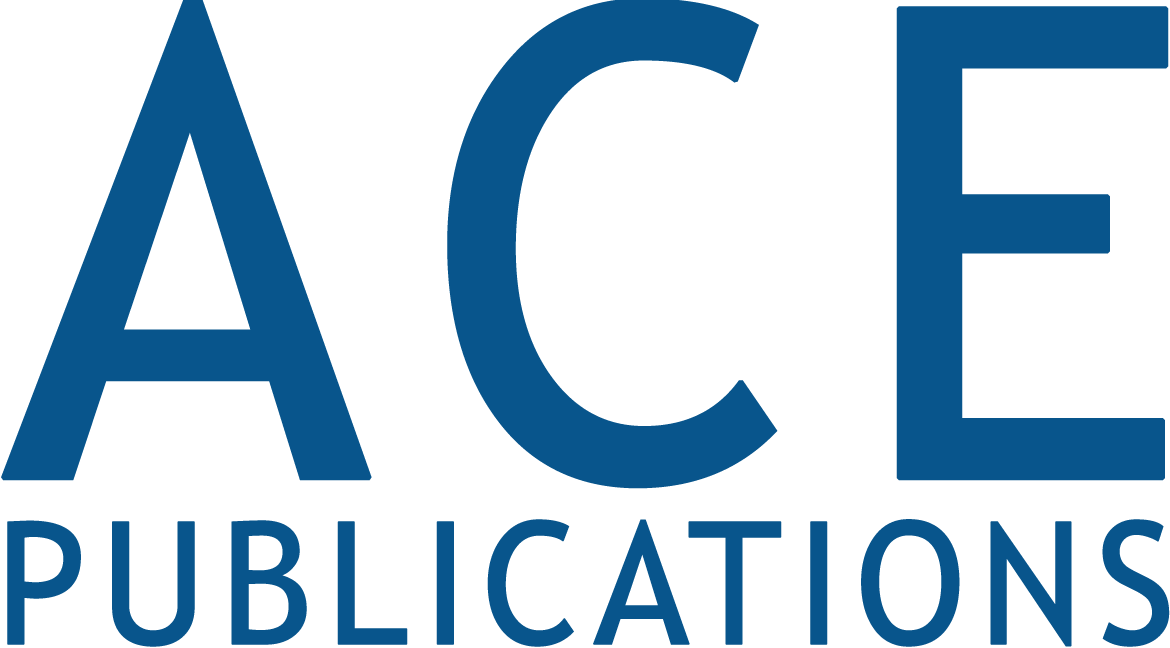
<style>
.page{position:relative;width:1170px;height:648px;background:#ffffff}
.page>*{position:absolute;margin:0}
.t1{font:656.2px "TrebuchetMS";letter-spacing:0.06em;color:#08558c;font-weight:bold;scale:0.95 1}
.t2{font:170.6px "TrebuchetMS";letter-spacing:0.06em;color:#08558c;font-weight:bold;scale:0.95 1}
</style>
<div class="page">
<p class="t1" style="left:1px;top:0px;width:1168px;height:489px">ACE</p>
<p class="t2" style="left:7px;top:519px;width:1163px;height:128px">PUBLICATIONS</p>
</div>
